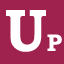
<style>
.page{position:relative;width:64px;height:64px;background:#9f224e}
.page>*{position:absolute;margin:0}
.t1{font:60px "BookmanOldStyle-Bold";color:#ffffff;scale:0.94 1}
.t2{font:24px "BookmanOldStyle-Bold";color:#ffffff;scale:0.94 1}
</style>
<div class="page">
<p class="t1" style="left:6px;top:10px;width:56px;height:42px">U<span class="t2">P</span></p>
</div>
